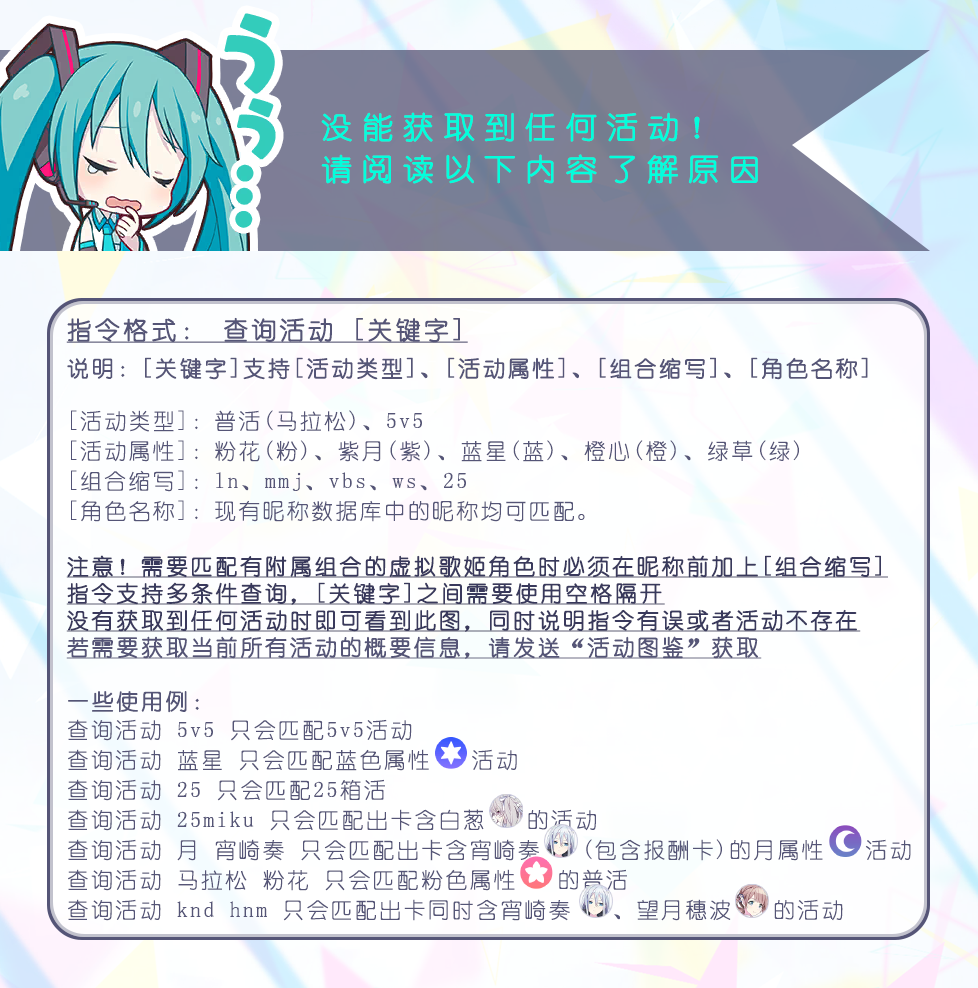
<style>
.page{position:relative;width:978px;height:988px}
.page>*{position:absolute;margin:0}
.t1{font:30px/42px "YouYuan";letter-spacing:0.28em;color:#01ffdd;font-weight:bold;scale:1.04 1}
.t2{font:22px/33px "YouYuan";letter-spacing:0.1em;color:#555577}
.t3{font:25px/33px "YouYuan";letter-spacing:0.1em;color:#555577;font-weight:bold;text-decoration:underline}
.t4{font:22px/33px "YouYuan";letter-spacing:0.1em;color:#555577;font-weight:bold}
.t5{font:22px/33px "YouYuan";letter-spacing:0.1em;color:#39395c;font-weight:bold;text-decoration:underline}
.t6{font:22px/33px "YouYuan";letter-spacing:0.1em;color:#555577;font-weight:bold;text-decoration:underline}
</style>
<div class="page">
<p class="t1" style="left:321px;top:112px;width:437px;height:72px">没能获取到任何活动！<br>请阅读以下内容了解原因</p>
<p class="t2" style="left:66px;top:317px;width:845px;height:604px"><span class="t3">指令格式： 查询活动 [关键字]<br></span><span class="t4">说明：[关键字]支持[活动类型]、[活动属性]、[组合缩写]、[角色名称]<br></span><br>[活动类型]：普活(马拉松)、5v5<br>[活动属性]：粉花(粉)、紫月(紫)、蓝星(蓝)、橙心(橙)、绿草(绿)<br>[组合缩写]：ln、mmj、vbs、ws、25<br>[角色名称]：现有昵称数据库中的昵称均可匹配。<br><br><span class="t5">注意！需要匹配有附属组合的虚拟歌姬角色时必须在昵称前加上[组合缩写]<br>指令支持多条件查询，[关键字]之间需要使用空格隔开<br>没有获取到任何活动时即可看到此图，同时说明指令有误或者活动不存在<br></span><span class="t6">若需要获取当前所有活动的概要信息，请发送“活动图鉴”获取<br><br></span><span class="t4">一些使用例：<br></span>查询活动 5v5 只会匹配5v5活动<br>查询活动 蓝星 只会匹配蓝色属性   活动<br>查询活动 25 只会匹配25箱活<br>查询活动 25miku 只会匹配出卡含白葱   的活动<br>查询活动 月 宵崎奏 只会匹配出卡含宵崎奏   (包含报酬卡)的月属性   活动<br>查询活动 马拉松 粉花 只会匹配粉色属性   的普活<br>查询活动 knd hnm 只会匹配出卡同时含宵崎奏   、望月穗波   的活动</p>
</div>
